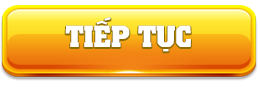
<style>
.page{position:relative;width:260px;height:90px;background:#ffffff}
.page>*{position:absolute;margin:0}
.t1{font:30px "UTM-Colossalis";color:#ffffff}
</style>
<div class="page">
<p class="t1" style="left:65px;top:17px;width:126px;height:35px">TIẾP TỤC</p>
</div>
